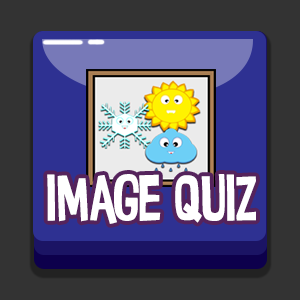
<style>
.page{position:relative;width:300px;height:300px;background:#333333}
.page>*{position:absolute;margin:0}
.t1{font:66.4px "InsideOut";color:#ffffff;scale:0.82 1}
</style>
<div class="page">
<p class="t1" style="left:47px;top:174px;width:209px;height:50px">image quiz</p>
</div>
